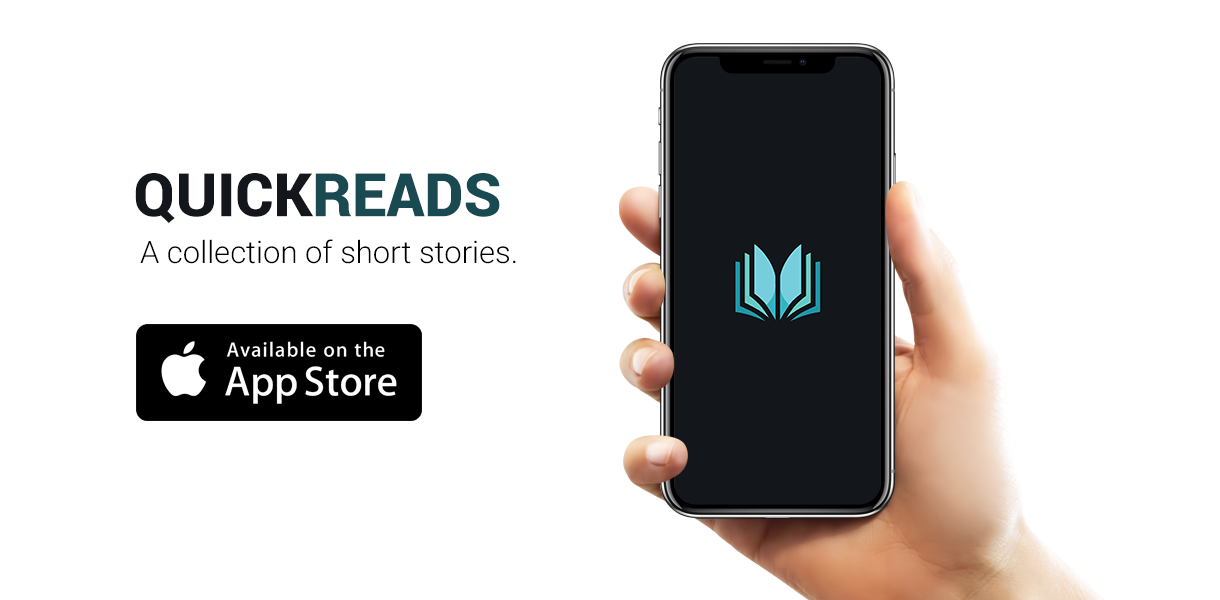
<style>
.page{position:relative;width:1220px;height:600px;background:#ffffff}
.page>*{position:absolute;margin:0}
.t1{font:60px "Roboto-Black";color:#13171b}
.t2{font:60px "Roboto-Black";color:#194951}
.t3{font:31px "Roboto-Light";color:#000000}
</style>
<div class="page">
<p class="t1" style="left:135px;top:173px;width:365px;height:50px">QUICK<span class="t2">READS</span></p>
<p class="t3" style="left:140px;top:239px;width:376px;height:25px">A collection of short stories.</p>
</div>
